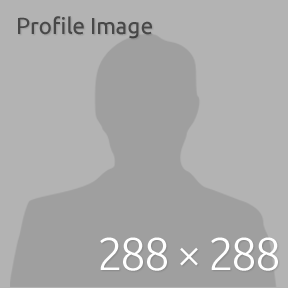
<style>
.page{position:relative;width:288px;height:288px;background:#b3b3b3}
.page>*{position:absolute;margin:0}
.t1{font:23px "Ubuntu";letter-spacing:-0.01em;color:#484848}
.t2{font:46px "Ubuntu-Light";letter-spacing:-0.05em;color:#ffffff}
</style>
<div class="page">
<p class="t1" style="left:18px;top:16px;width:134px;height:23px">Profile Image</p>
<p class="t2" style="left:100px;top:237px;width:178px;height:34px">288 × 288</p>
</div>
